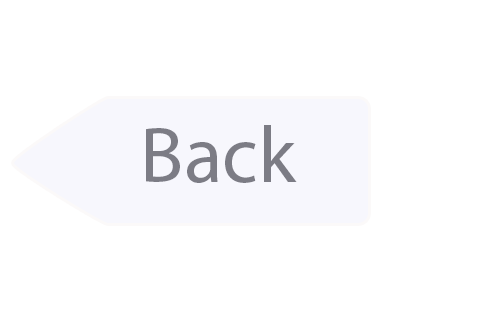
<style>
.page{position:relative;width:480px;height:320px;background:#ffffff}
.page>*{position:absolute;margin:0}
.t1{font:80px "MyriadPro-Regular";color:#7c7c85}
</style>
<div class="page">
<p class="t1" style="left:146px;top:125px;width:151px;height:58px">Back</p>
</div>
